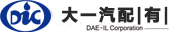
<style>
.page{position:relative;width:173px;height:33px;background:#ffffff}
.page>*{position:absolute;margin:0}
.t1{font:16px "MicrosoftYaHei-Bold";color:#2a2828;font-weight:bold}
</style>
<div class="page">
<p class="t1" style="left:61px;top:6px;width:107px;height:19px">大一汽配|有|</p>
</div>
